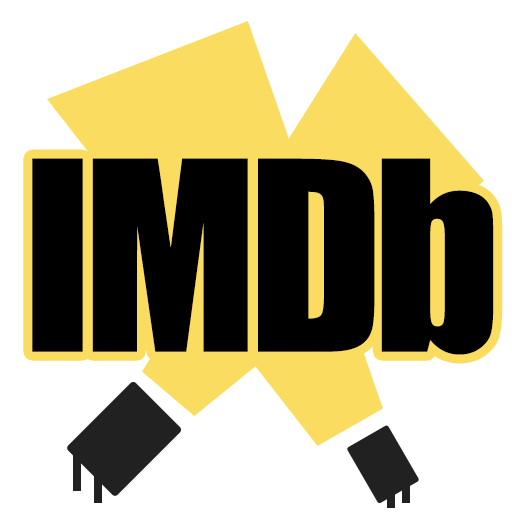
<style>
.page{position:relative;width:512px;height:512px;background:#ffffff}
.page>*{position:absolute;margin:0}
.t1{font:244.2px "Impact";letter-spacing:-0.04em;color:#000000}
</style>
<div class="page">
<p class="t1" style="left:32px;top:158px;width:462px;height:197px">IMDb</p>
</div>
